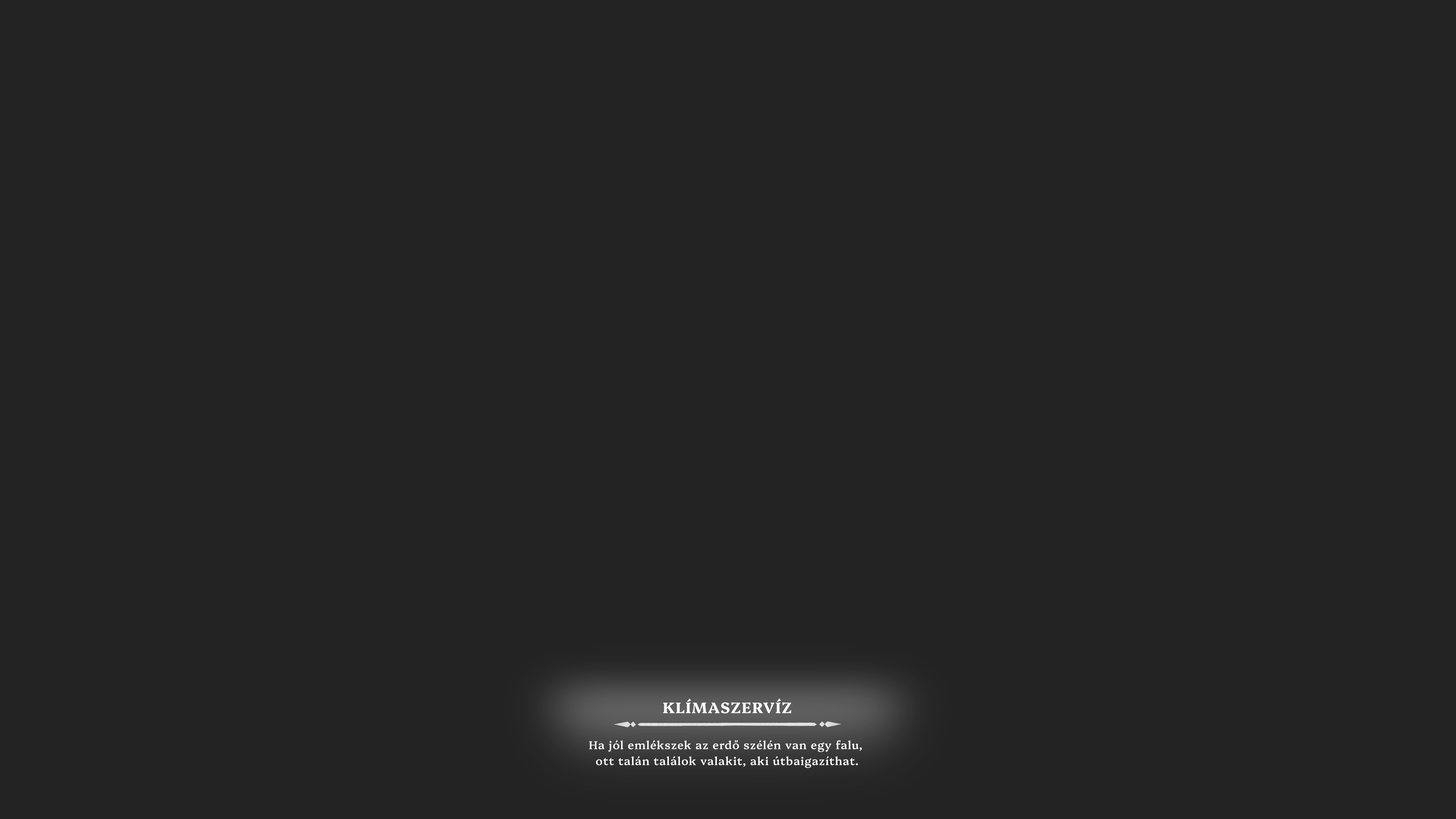
<style>
.page{position:relative;width:1456px;height:819px;background:#232323}
.page>*{position:absolute;margin:0}
.t1{font:15.2px "Platypi-Bold";letter-spacing:0.05em;color:#fffefe;text-transform:uppercase}
.t2{font:11.4px/15.9px "Platypi-Medium";letter-spacing:0.05em;color:#ffffff}
</style>
<div class="page">
<p class="t1" style="left:663px;top:698px;width:128px;height:16px">Klímaszervíz</p>
<p class="t2" style="left:589px;top:740px;width:273px;height:28px;text-align:center">Ha jól emlékszek az erdő szélén van egy falu, <br>ott talán találok valakit, aki útbaigazíthat.</p>
</div>
